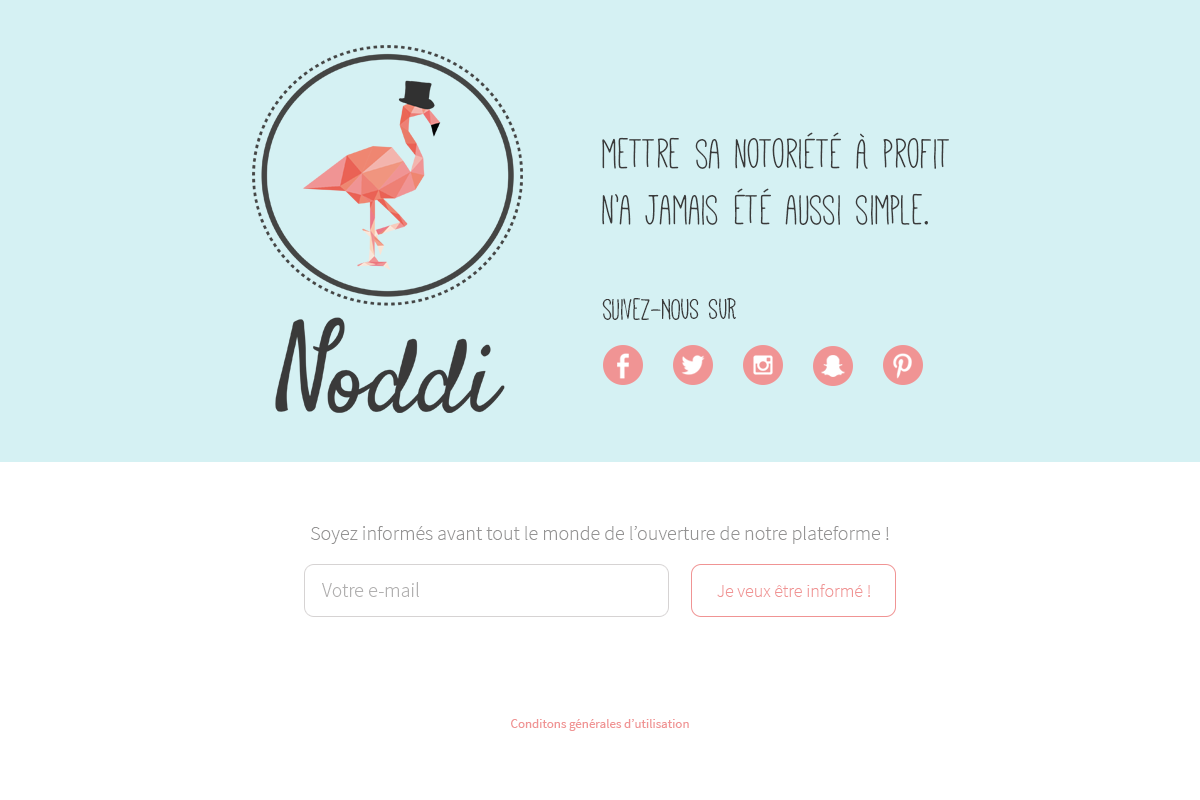
<style>
.page{position:relative;width:1200px;height:800px;background:#d5f1f3}
.page>*{position:absolute;margin:0}
.t1{font:47px "Mathlete-Skinny";color:#3a3a3a}
.t2{font:33px "Mathlete-Skinny";color:#3a3a3a}
.t3{font:20px "SourceSansPro-Light";color:#949393}
.t4{font:20px "SourceSansPro-Light";color:#b1b0b0}
.t5{font:18px "SourceSansPro-Light";color:#f09494}
.t6{font:13px "SourceSansPro-Regular";color:#f09494}
</style>
<div class="page">
<p class="t1" style="left:602px;top:132px;width:347px;height:93px">mettre sa notoriété à profit<br>n’a jamais été aussi simple.</p>
<p class="t2" style="left:602px;top:298px;width:134px;height:22px">suivez-NOUS SUR</p>
<p class="t3" style="left:311px;top:526px;width:578px;height:18px">Soyez informés avant tout le monde de l’ouverture de notre plateforme !</p>
<p class="t4" style="left:322px;top:582px;width:97px;height:15px">Votre e-mail</p>
<p class="t5" style="left:717px;top:584px;width:153px;height:13px">Je veux être informé !</p>
<p class="t6" style="left:511px;top:719px;width:178px;height:12px">Conditons générales d’utilisation</p>
</div>
